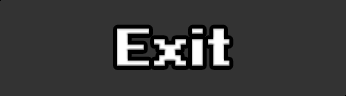
<style>
.page{position:relative;width:346px;height:96px;background:#333333}
.page>*{position:absolute;margin:0}
.t1{font:48px "PixeloidSans-Bold";color:#ffffff}
</style>
<div class="page">
<p class="t1" style="left:117px;top:28px;width:113px;height:38px">Exit</p>
</div>
